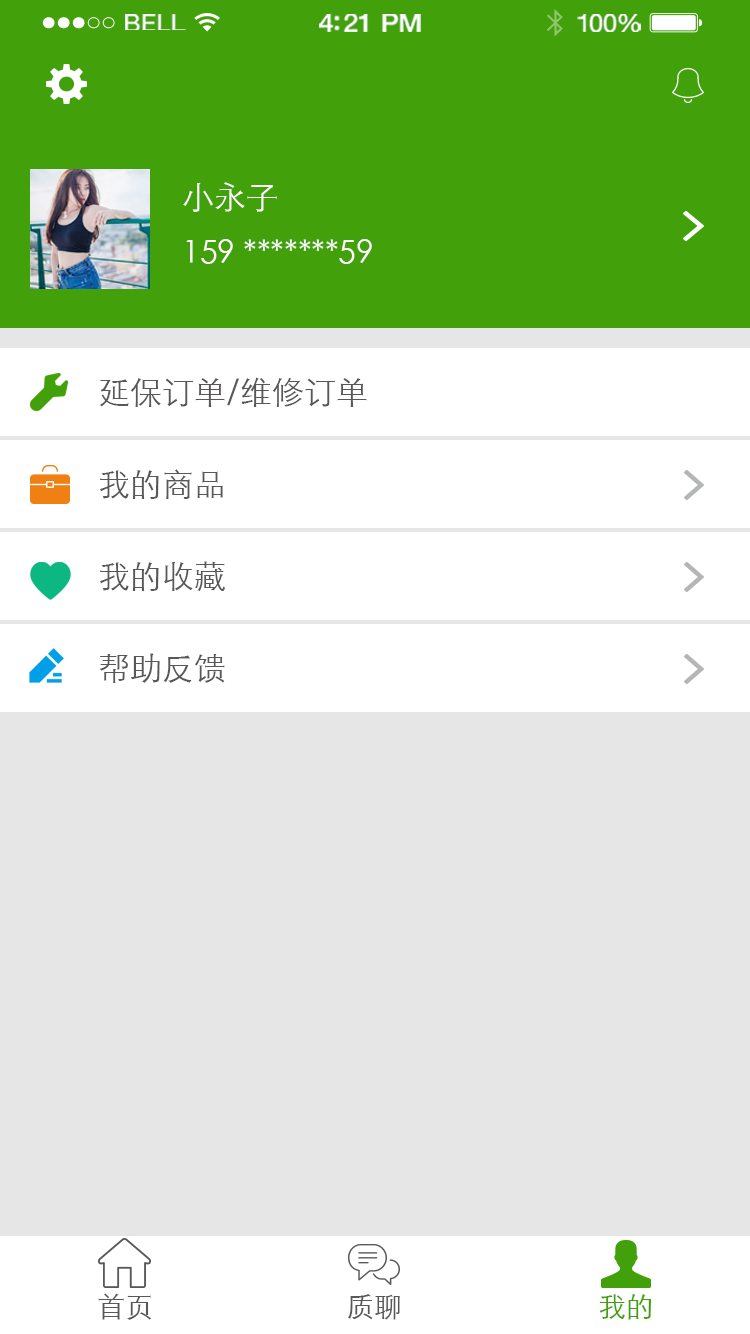
<style>
.page{position:relative;width:750px;height:1334px;background:#e6e6e6}
.page>*{position:absolute;margin:0}
.t1{font:23.3px "HelveticaNeue";letter-spacing:0.02em;color:#ffffff;scale:1.06 1}
.t2{font:25.3px "HelveticaNeue-Medium";letter-spacing:-0.02em;color:#ffffff;scale:1.06 1}
.t3{font:24.3px "HelveticaNeue";letter-spacing:-0.02em;color:#ffffff;scale:1.06 1}
.t4{font:32px/56px "STXihei";color:#ffffff}
.t5{font:32px "STXihei";color:#595757}
.t6{font:28px "STXihei";color:#595757}
.t7{font:28px "STXihei";color:#42a00a}
</style>
<div class="page">
<p class="t1" style="left:125px;top:14px;width:61px;height:16px">BELL</p>
<p class="t2" style="left:319px;top:14px;width:102px;height:18px">4:21 PM</p>
<p class="t3" style="left:577px;top:14px;width:64px;height:18px">100%</p>
<p class="t4" style="left:183px;top:182px;width:189px;height:82px">小永子<br>159 *******59</p>
<p class="t5" style="left:99px;top:377px;width:268px;height:30px">延保订单/维修订单</p>
<p class="t5" style="left:100px;top:469px;width:123px;height:30px">我的商品</p>
<p class="t5" style="left:100px;top:561px;width:126px;height:30px">我的收藏</p>
<p class="t5" style="left:99px;top:653px;width:126px;height:30px">帮助反馈</p>
<p class="t6" style="left:98px;top:1293px;width:53px;height:27px">首页</p>
<p class="t6" style="left:348px;top:1294px;width:52px;height:26px">质聊</p>
<p class="t7" style="left:599px;top:1294px;width:53px;height:26px">我的</p>
</div>
